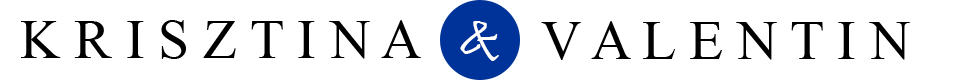
<style>
.page{position:relative;width:960px;height:80px;background:#ffffff}
.page>*{position:absolute;margin:0}
.t1{font:55.9px "TimesNewRomanPSMT";color:#000000}
.t2{font:55.9px "Pristina-Regular";color:#ffffff}
</style>
<div class="page">
<p class="t1" style="left:21px;top:20px;width:400px;height:39px">K R I S Z T I N A</p>
<p class="t2" style="left:460px;top:21px;width:39px;height:40px">&amp;</p>
<p class="t1" style="left:541px;top:21px;width:369px;height:39px">V A L E N T I N</p>
</div>
